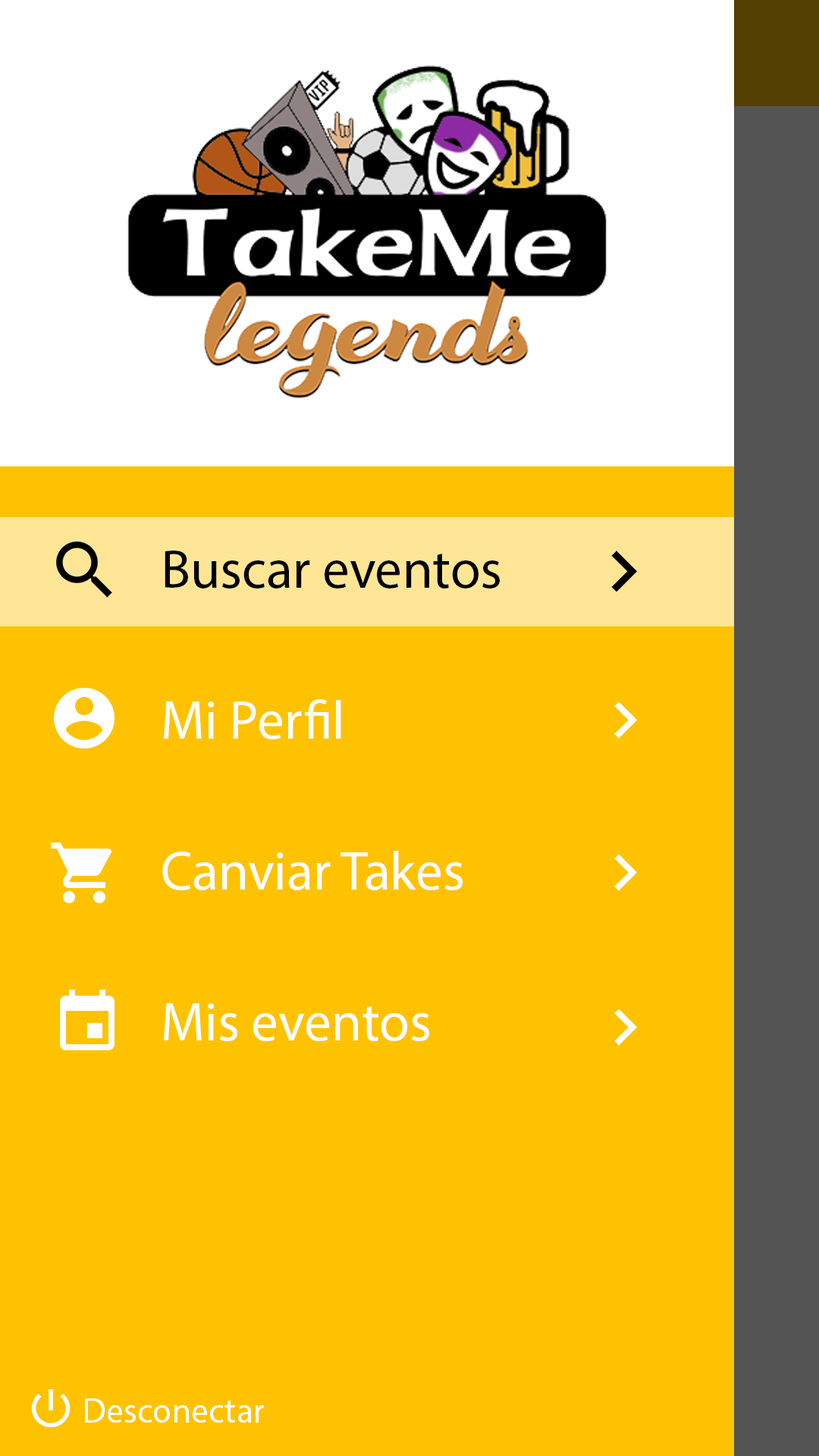
<style>
.page{position:relative;width:819px;height:1456px;background:#ffc200}
.page>*{position:absolute;margin:0}
.t1{font:54.6px/150.9px "MyriadPro-Regular";color:#ffffff}
.t2{font:54.6px/150.9px "MyriadPro-Regular";color:#010000}
.t3{font:34.9px "MyriadPro-Regular";color:#ffffff}
</style>
<div class="page">
<p class="t1" style="left:162px;top:551px;width:338px;height:490px"><span class="t2">Buscar eventos<br></span>Mi Perfil<br>Canviar Takes<br>Mis eventos</p>
<p class="t3" style="left:85px;top:1398px;width:179px;height:25px">Desconectar</p>
</div>
